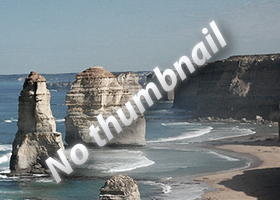
<style>
.page{position:relative;width:280px;height:200px}
.page>*{position:absolute;margin:0}
.t1{font:37.7px "MyriadHebrew-BoldIt";color:#e6e7ea}
</style>
<div class="page">
<p class="t1" style="left:45px;top:20px;width:182px;height:164px;rotate:-39deg">No thumbnail</p>
</div>
